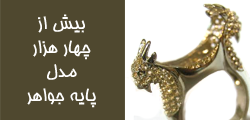
<style>
.page{position:relative;width:250px;height:120px;background:#4f482f}
.page>*{position:absolute;margin:0}
.t1{font:20px "Homa";color:#fefefe}
</style>
<div class="page">
<p class="t1" style="left:27px;top:14px;width:69px;height:94px;text-align:center">بیش از<br>چهار هزار<br>مدل<br>پایه جواهر</p>
</div>
